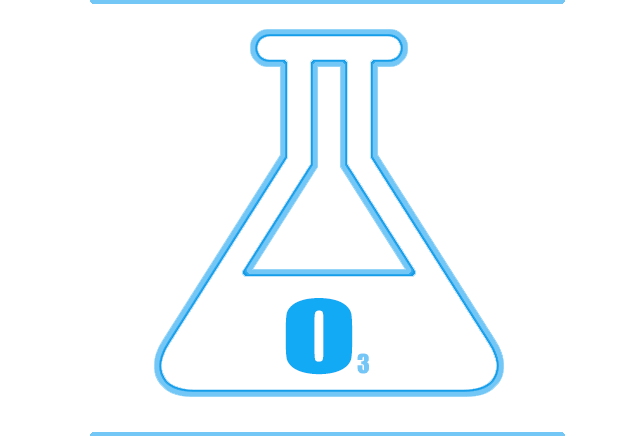
<style>
.page{position:relative;width:637px;height:436px;background:#ffffff}
.page>*{position:absolute;margin:0}
.t1{font:92.2px "Impact";color:#13aaf5;scale:1.51 1}
.t2{font:24px "Impact";color:#73c6f6}
</style>
<div class="page">
<p class="t1" style="left:285px;top:298px;width:68px;height:77px">O</p>
<p class="t2" style="left:357px;top:353px;width:12px;height:21px">3</p>
</div>
